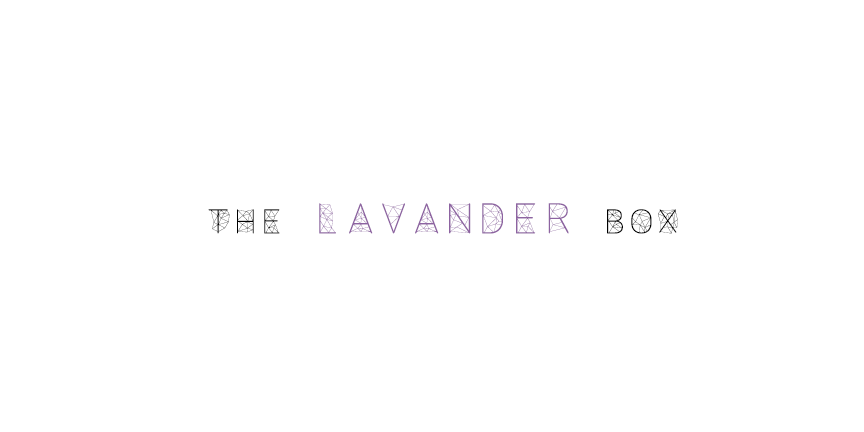
<style>
.page{position:relative;width:864px;height:432px;background:#ffffff}
.page>*{position:absolute;margin:0}
.t1{font:30px "Amethyst";letter-spacing:0.1em;color:#8d63a1}
.t2{font:24px "Amethyst";letter-spacing:0.1em;color:#000000}
</style>
<div class="page">
<p class="t1" style="left:208px;top:203px;width:470px;height:31px"><span class="t2">the </span>lavander<span class="t2"> box</span></p>
</div>
